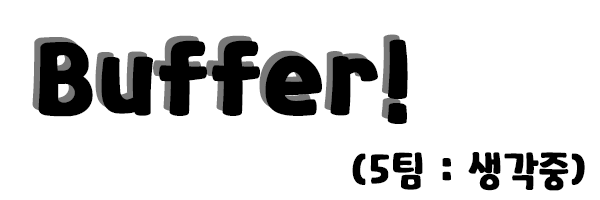
<style>
.page{position:relative;width:600px;height:200px;background:#ffffff}
.page>*{position:absolute;margin:0}
.t1{font:100px "Katuri";font-weight:bold}
.t2{font:100px "Katuri";color:#000000;font-weight:bold}
.t3{font:40px "Katuri";color:#000000;font-weight:bold}
</style>
<div class="page">
<p class="t1" style="left:32px;top:34px;width:370px;height:85px">Buffer!</p>
<p class="t2" style="left:38px;top:39px;width:370px;height:85px">Buffer!</p>
<p class="t3" style="left:352px;top:152px;width:233px;height:39px">(5팀 : 생각중)</p>
</div>
